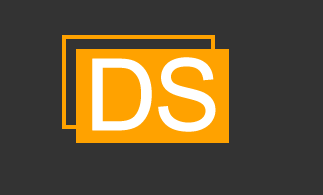
<style>
.page{position:relative;width:323px;height:195px;background:#333333}
.page>*{position:absolute;margin:0}
.t1{font:99px "ArialMT";letter-spacing:-0.05em;color:#ffffff;font-weight:bold}
</style>
<div class="page">
<p class="t1" style="left:92px;top:57px;width:124px;height:75px">DS</p>
</div>
